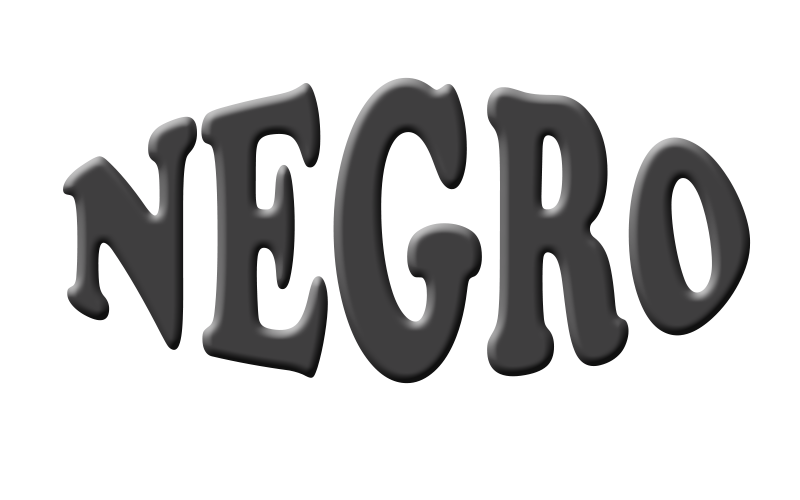
<style>
.page{position:relative;width:800px;height:500px;background:#ffffff}
.page>*{position:absolute;margin:0}
.t1{font:180px "CooperBlack";color:#3f3e3f}
</style>
<div class="page">
<p class="t1" style="left:63px;top:77px;width:688px;height:307px">NEGRO</p>
</div>
